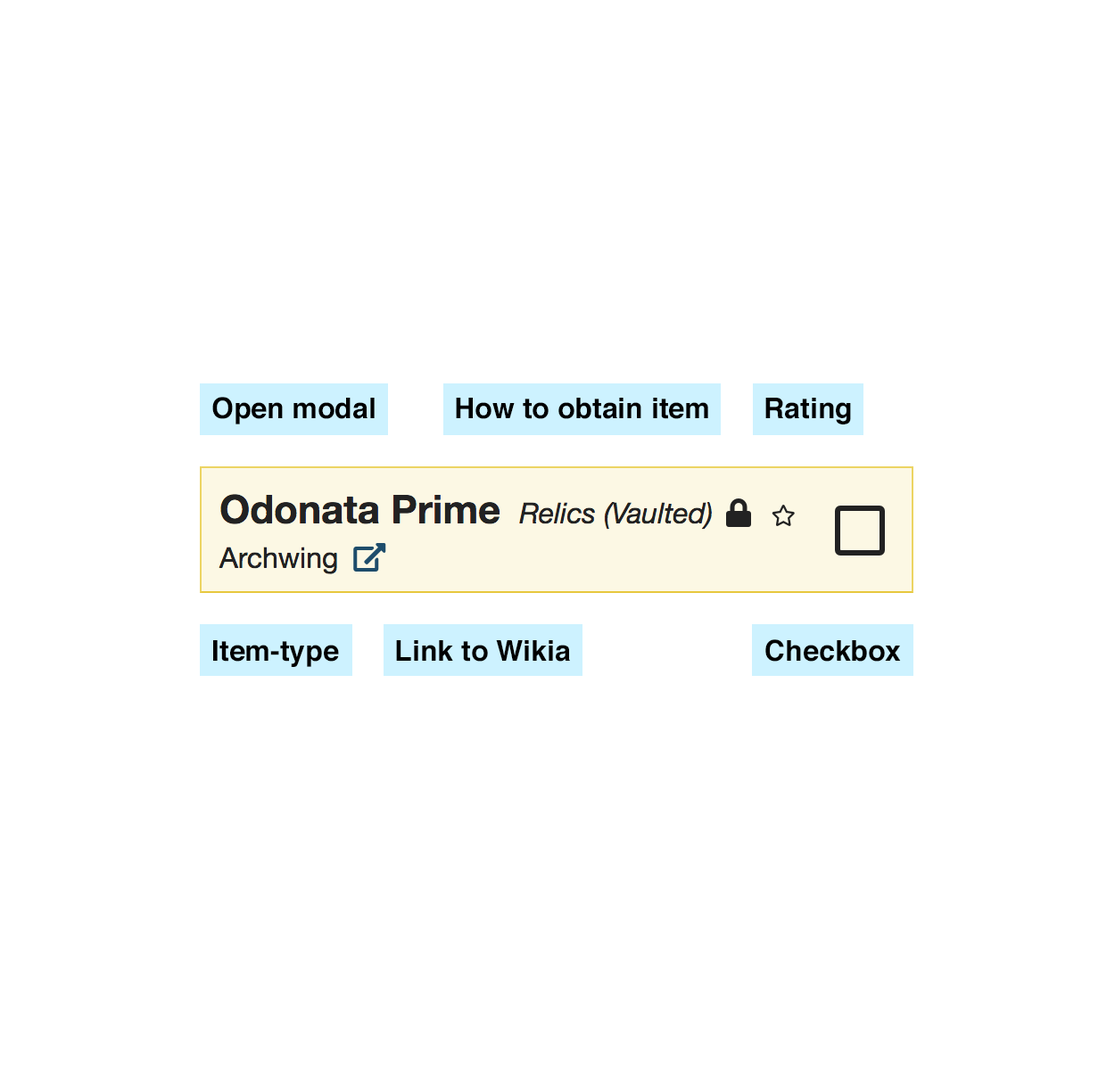
<style>
.page{position:relative;width:1115px;height:1070px;background:#ffffff}
.page>*{position:absolute;margin:0}
.t1{font:28.5px "Helvetica-Bold";color:#000000}
</style>
<div class="page">
<p class="t1" style="left:212px;top:397px;width:162px;height:27px">Open modal</p>
<p class="t1" style="left:456px;top:398px;width:252px;height:21px">How to obtain item</p>
<p class="t1" style="left:765px;top:398px;width:86px;height:26px">Rating</p>
<p class="t1" style="left:213px;top:640px;width:126px;height:27px">Item-type</p>
<p class="t1" style="left:396px;top:640px;width:174px;height:22px">Link to Wikia</p>
<p class="t1" style="left:765px;top:639px;width:136px;height:23px">Checkbox</p>
</div>
